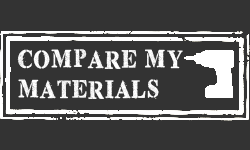
<style>
.page{position:relative;width:250px;height:150px;background:#333333}
.page>*{position:absolute;margin:0}
.t1{font:25px "TopSecretStamp";color:#ffffff}
</style>
<div class="page">
<p class="t1" style="left:17px;top:49px;width:166px;height:50px">COMPARE MY<br>MATERIALS</p>
</div>
